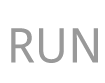
<style>
.page{position:relative;width:105px;height:83px;background:#ffffff}
.page>*{position:absolute;margin:0}
.t1{font:47.9px "DroidSans";color:#999999}
</style>
<div class="page">
<p class="t1" style="left:11px;top:28px;width:87px;height:35px">RUN</p>
</div>
